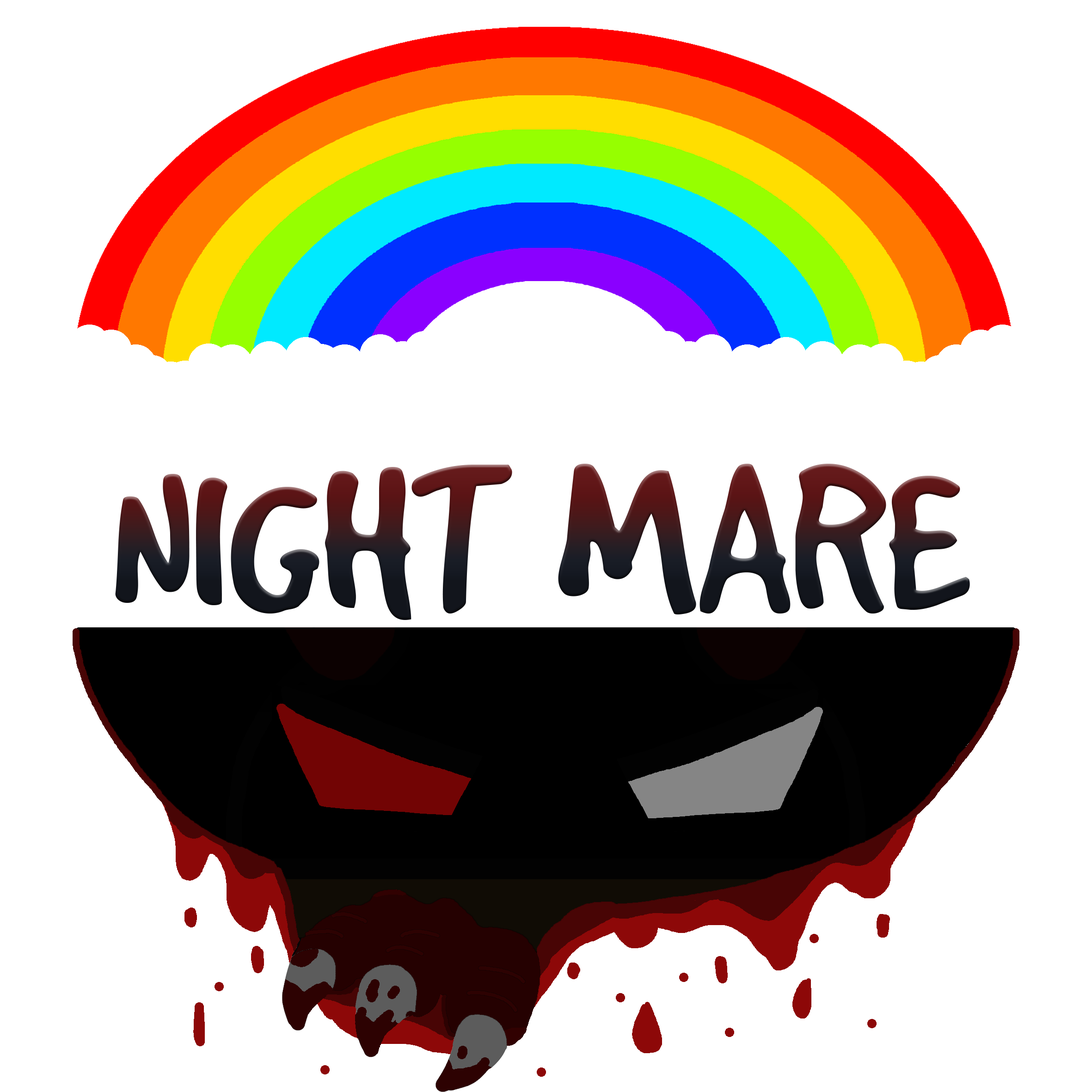
<style>
.page{position:relative;width:1092px;height:1092px;background:#ffffff}
.page>*{position:absolute;margin:0}
.t1{font:233.7px "GoodDogCool"}
</style>
<div class="page">
<p class="t1" style="left:115px;top:464px;width:855px;height:156px">NIGHT MARE</p>
</div>
